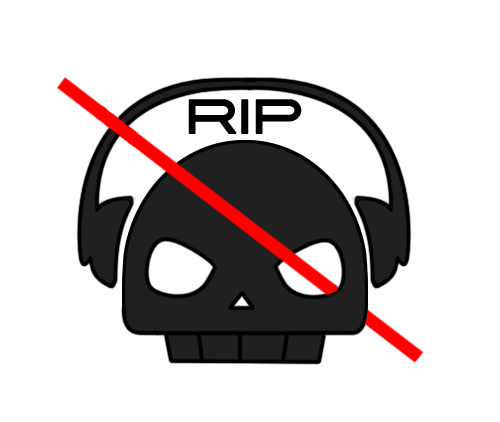
<style>
.page{position:relative;width:500px;height:422px;background:#ffffff}
.page>*{position:absolute;margin:0}
.t1{font:48px "Arkitech-Medium";color:#000000;font-weight:bold}
</style>
<div class="page">
<p class="t1" style="left:188px;top:99px;width:114px;height:35px">RIP</p>
</div>
